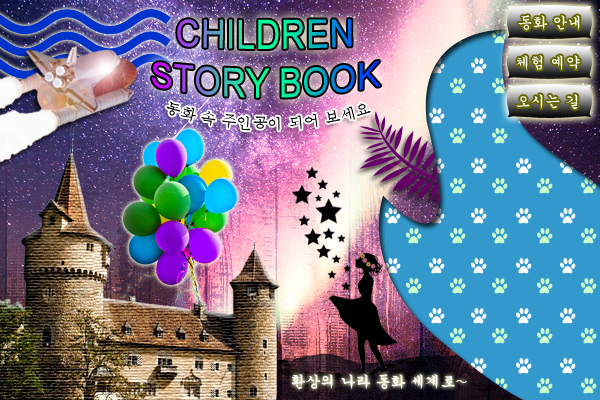
<style>
.page{position:relative;width:600px;height:400px}
.page>*{position:absolute;margin:0}
.t1{font:15px "Gungsuh";color:#ffffff}
.t2{font:35px "ArialMT"}
.t3{font:15px "Batang";color:#000000}
</style>
<div class="page">
<p class="t1" style="left:518px;top:15px;width:62px;height:15px">동화 안내</p>
<p class="t2" style="left:152px;top:19px;width:229px;height:79px;text-align:center">CHILDREN<br>STORY BOOK</p>
<p class="t1" style="left:516px;top:55px;width:64px;height:15px">체험 예약</p>
<p class="t3" style="left:166px;top:101px;width:205px;height:30px;text-align:center">동화 속 주인공이 되어 보세요</p>
<p class="t1" style="left:516px;top:94px;width:62px;height:15px">오시는 길</p>
<p class="t1" style="left:291px;top:374px;width:176px;height:16px">환상의 나라 동화 세계로~</p>
</div>
